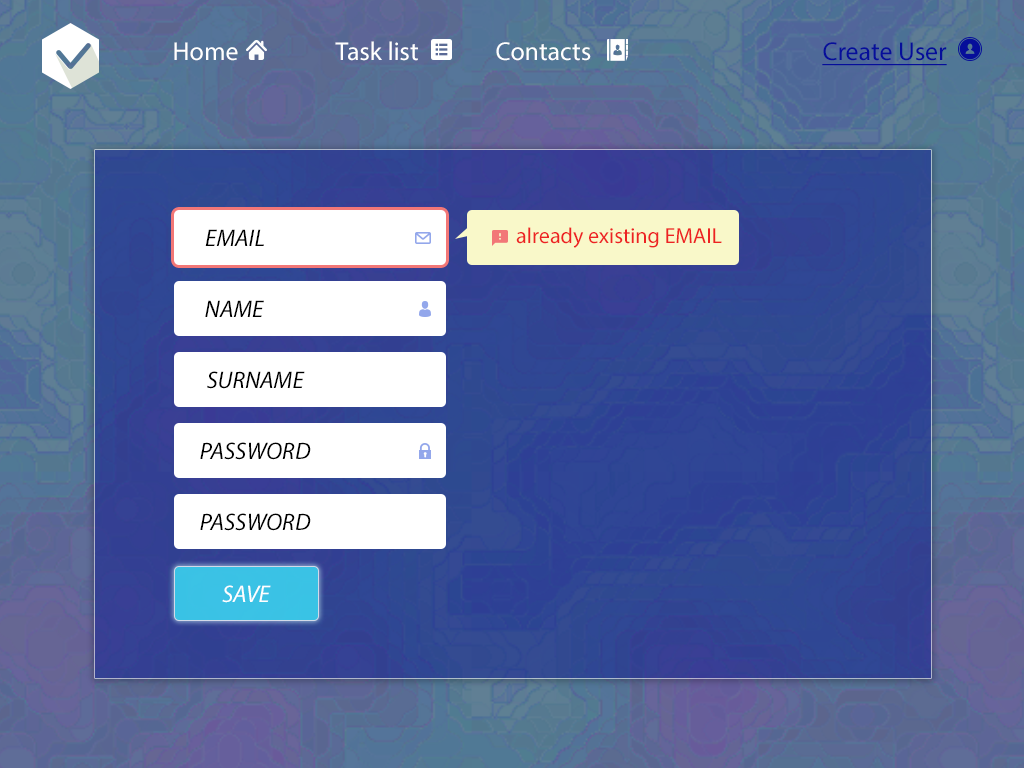
<style>
.page{position:relative;width:1024px;height:768px}
.page>*{position:absolute;margin:0}
.t1{font:26px "MyriadPro-Regular";color:#ffffff}
.t2{font:26px "MyriadPro-Regular";color:#060e9a;text-decoration:underline}
.t3{font:24px "MyriadPro-It";color:#000000}
.t4{font:22px "MyriadPro-Regular";color:#ed2323}
.t5{font:24px "MyriadPro-It";color:#ffffff}
</style>
<div class="page">
<p class="t1" style="left:335px;top:41px;width:83px;height:20px">Task list</p>
<p class="t1" style="left:174px;top:42px;width:64px;height:19px">Home</p>
<p class="t1" style="left:496px;top:42px;width:95px;height:19px">Contacts</p>
<p class="t2" style="left:822px;top:42px;width:125px;height:24px">Create User</p>
<p class="t3" style="left:205px;top:229px;width:59px;height:17px">EMAIL</p>
<p class="t4" style="left:516px;top:227px;width:206px;height:21px">already existing EMAIL</p>
<p class="t3" style="left:205px;top:300px;width:59px;height:17px">NAME</p>
<p class="t3" style="left:207px;top:371px;width:98px;height:18px">SURNAME</p>
<p class="t3" style="left:200px;top:442px;width:111px;height:18px">PASSWORD</p>
<p class="t3" style="left:200px;top:513px;width:111px;height:18px">PASSWORD</p>
<p class="t5" style="left:222px;top:585px;width:49px;height:18px">SAVE</p>
</div>
